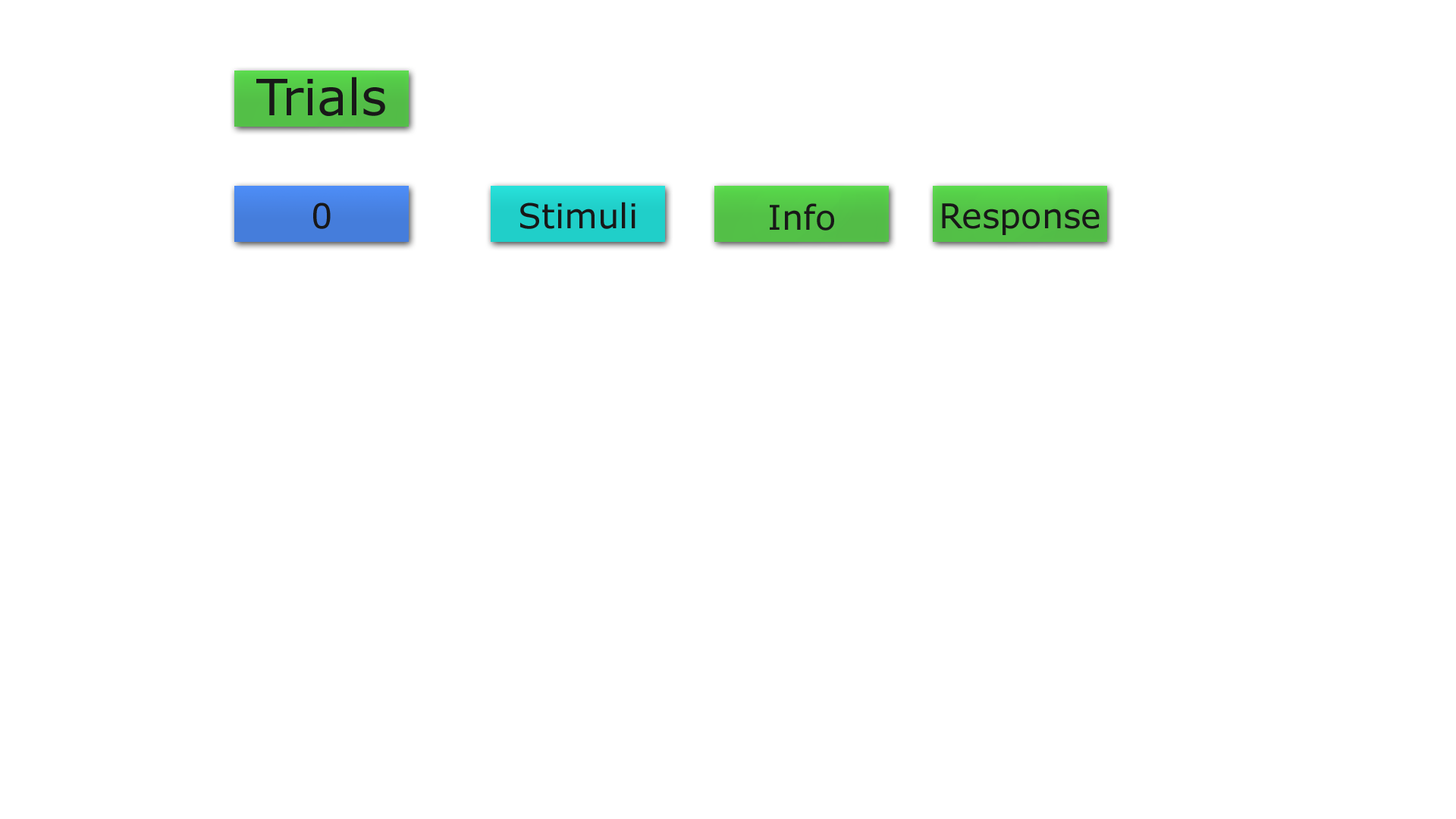
<style>
.page{position:relative;width:1456px;height:819px;background:#ffffff}
.page>*{position:absolute;margin:0}
.t1{font:50px "Verdana";color:#181818}
.t2{font:34.1px "Verdana";color:#181818}
</style>
<div class="page">
<p class="t1" style="left:256px;top:77px;width:129px;height:39px">Trials</p>
<p class="t2" style="left:313px;top:202px;width:18px;height:27px">0</p>
<p class="t2" style="left:520px;top:202px;width:115px;height:27px">Stimuli</p>
<p class="t2" style="left:770px;top:203px;width:64px;height:28px">Info</p>
<p class="t2" style="left:942px;top:203px;width:158px;height:32px">Response</p>
</div>
